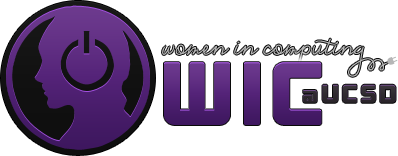
<style>
.page{position:relative;width:398px;height:156px;background:#ffffff}
.page>*{position:absolute;margin:0}
.t1{font:89.2px "Outage-Regular";color:#542378;text-transform:uppercase}
.t2{font:25.4px "Outage-Regular";letter-spacing:0.05em;color:#302b30;text-transform:uppercase}
.t3{font:36px "ONRAMP";letter-spacing:0.05em;color:#302b30;text-transform:uppercase}
</style>
<div class="page">
<p class="t1" style="left:164px;top:62px;width:158px;height:63px">wic</p>
<p class="t2" style="left:303px;top:84px;width:93px;height:19px"><span class="t3">@</span>ucsd</p>
</div>
